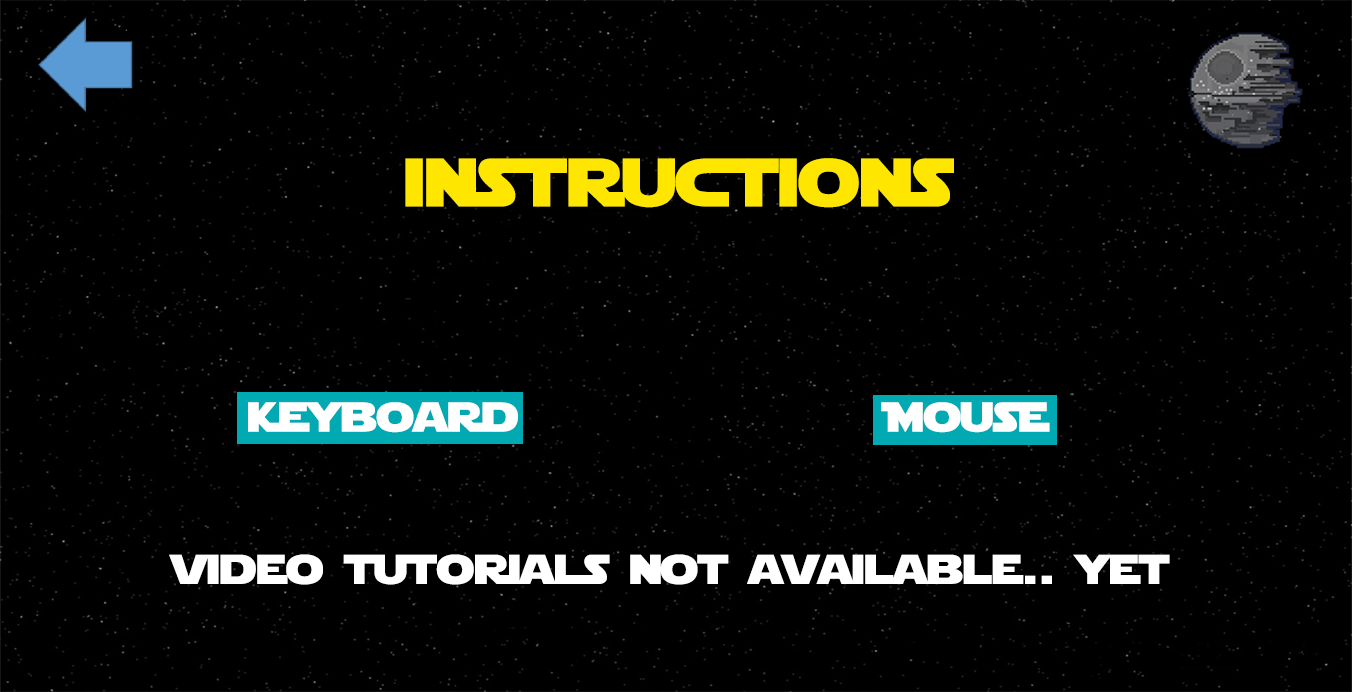
<style>
.page{position:relative;width:1352px;height:692px;background:#000000}
.page>*{position:absolute;margin:0}
.t1{font:67.6px "StarJedi";color:#ffe600;scale:1.1 1}
.t2{font:41.3px "StarJedi";color:#ffffff;scale:1.1 1}
</style>
<div class="page">
<p class="t1" style="left:405px;top:158px;width:549px;height:50px">instructions</p>
<p class="t2" style="left:248px;top:402px;width:270px;height:31px">keyboard</p>
<p class="t2" style="left:881px;top:402px;width:169px;height:31px">Mouse</p>
<p class="t2" style="left:169px;top:554px;width:1001px;height:31px">video tutorials not available.. yet</p>
</div>
